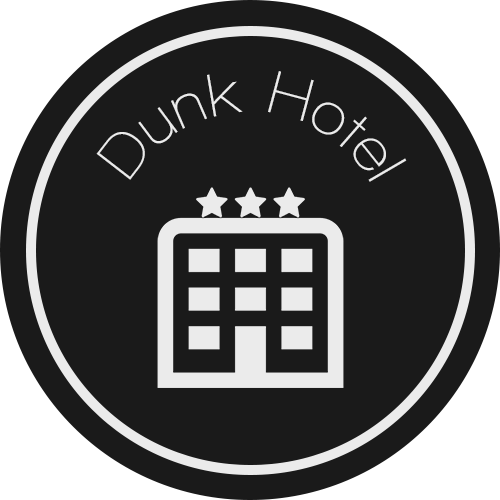
<style>
.page{position:relative;width:500px;height:500px;background:#1a1a1a}
.page>*{position:absolute;margin:0}
.t1{font:62px "WalkwaySemiBold";color:#ebebeb}
</style>
<div class="page">
<p class="t1" style="left:96px;top:71px;width:311px;height:111px">Dunk Hotel</p>
</div>
